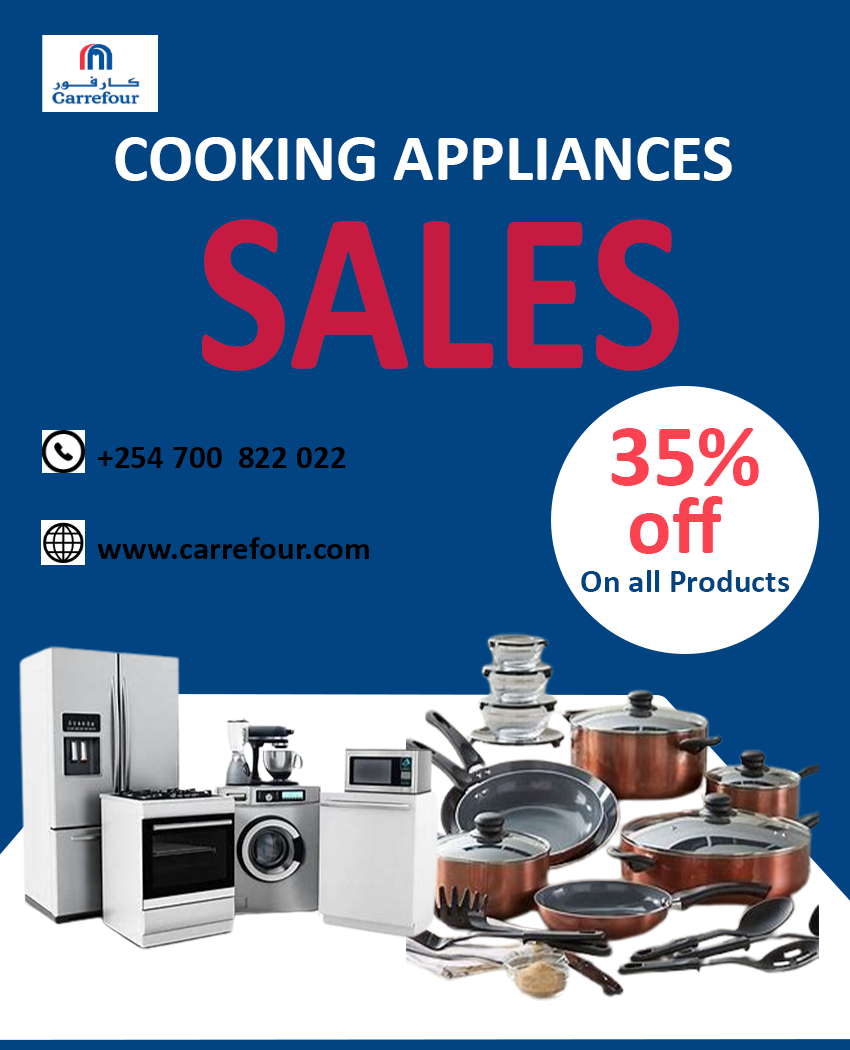
<style>
.page{position:relative;width:850px;height:1050px;background:#014481}
.page>*{position:absolute;margin:0}
.t1{font:66.7px "Calibri-Bold";color:#ffffff}
.t2{font:230.8px "Calibri-Bold";color:#c61a40;scale:0.87 1}
.t3{font:87.5px "Calibri-Bold";color:#fa4251}
.t4{font:33.3px "Calibri-Bold";color:#000000}
.t5{font:83.3px "Calibri-Bold";color:#fa4251}
.t6{font:33.3px "Calibri-Bold";color:#014481}
</style>
<div class="page">
<p class="t1" style="left:115px;top:137px;width:617px;height:44px">COOKING APPLIANCES</p>
<p class="t2" style="left:202px;top:219px;width:477px;height:152px">SALES</p>
<p class="t3" style="left:611px;top:428px;width:148px;height:58px">35%</p>
<p class="t4" style="left:97px;top:447px;width:249px;height:21px">+254 700  822 022</p>
<p class="t5" style="left:629px;top:496px;width:94px;height:58px">off</p>
<p class="t4" style="left:97px;top:537px;width:272px;height:22px">www.carrefour.com</p>
<p class="t6" style="left:581px;top:570px;width:209px;height:22px">On all Products</p>
</div>
